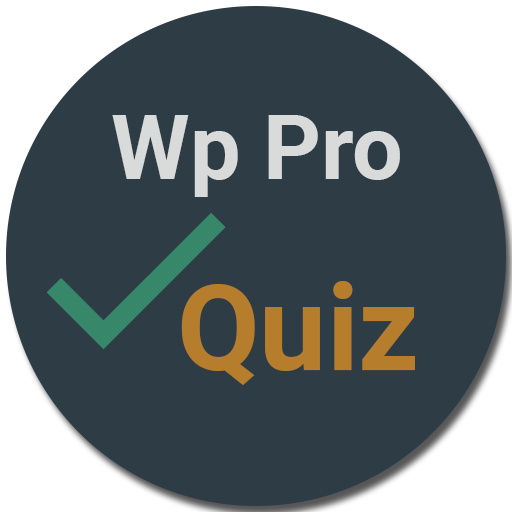
<style>
.page{position:relative;width:512px;height:512px;background:#2e3c46}
.page>*{position:absolute;margin:0}
.t1{font:90px "Roboto-Bold";color:#d9dada}
.t2{font:120px "Roboto-Bold";color:#b67d2c}
</style>
<div class="page">
<p class="t1" style="left:112px;top:115px;width:288px;height:82px">Wp Pro</p>
<p class="t2" style="left:181px;top:281px;width:234px;height:105px">Quiz</p>
</div>
